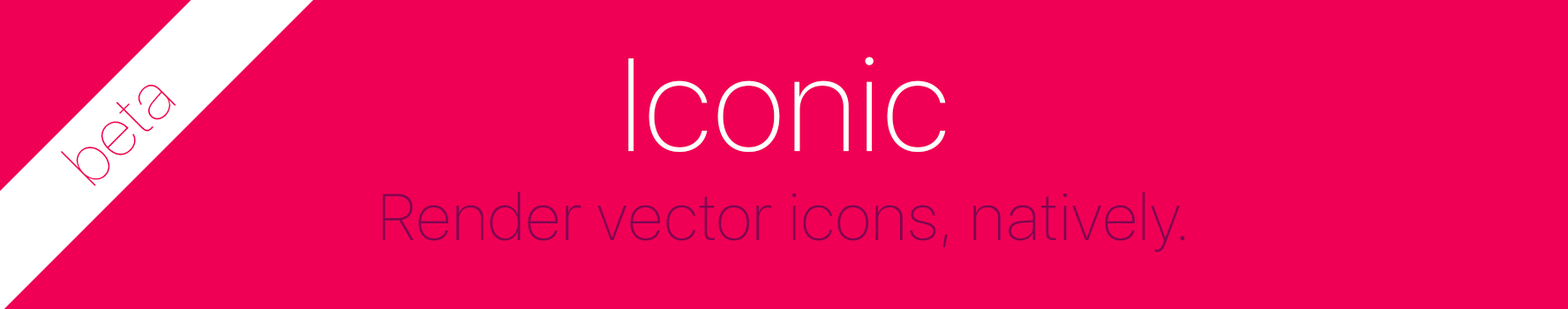
<style>
.page{position:relative;width:1568px;height:309px;background:#f00054}
.page>*{position:absolute;margin:0}
.t1{font:131.2px "SFUIDisplay-Thin";letter-spacing:0.025em;color:#ffffff}
.t2{font:65.5px "SFUIDisplay-Ultralight";letter-spacing:0.025em;color:#f00054}
.t3{font:65.6px "SFUIDisplay-Thin";letter-spacing:0.025em;color:#7f0651}
</style>
<div class="page">
<p class="t1" style="left:628px;top:56px;width:318px;height:97px">Iconic</p>
<p class="t2" style="left:60px;top:85px;width:116px;height:101px;rotate:-45deg">beta</p>
<p class="t3" style="left:382px;top:191px;width:803px;height:61px">Render vector icons, natively.</p>
</div>
